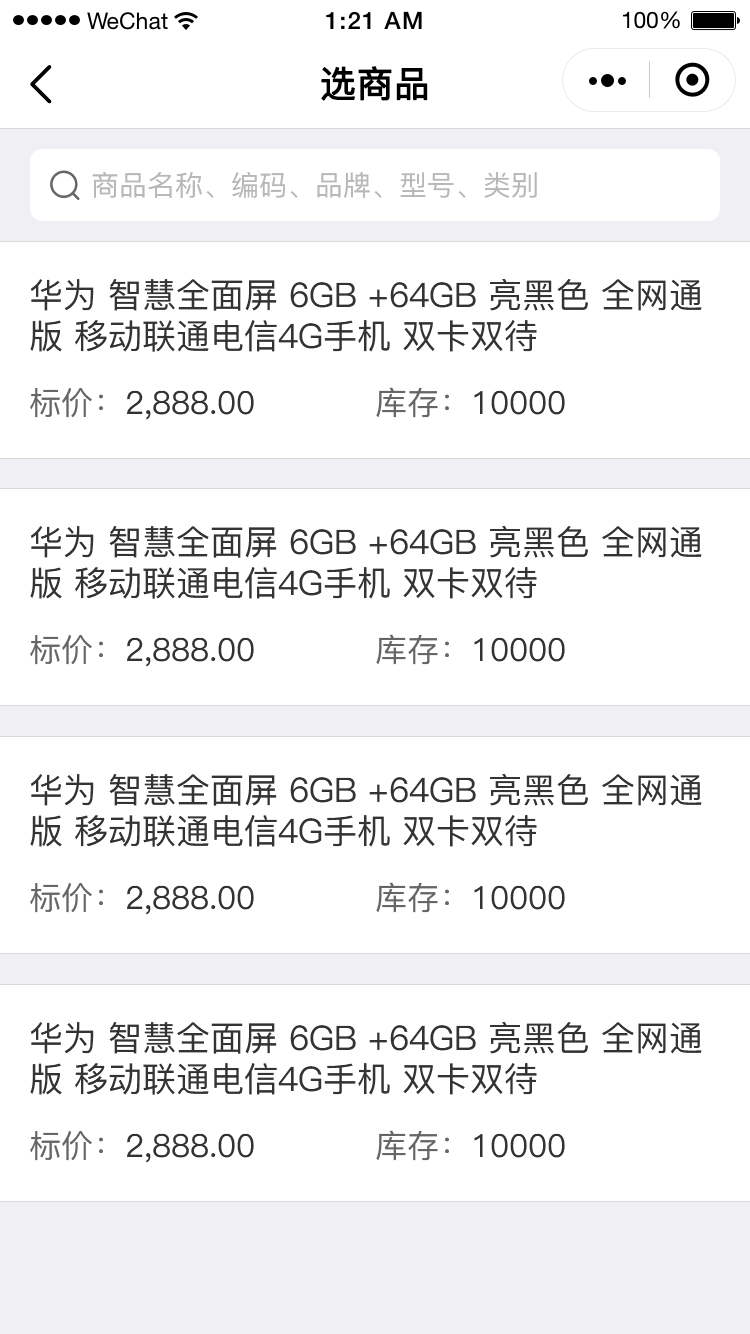
<style>
.page{position:relative;width:750px;height:1334px;background:#ffffff}
.page>*{position:absolute;margin:0}
.t1{font:36px "PingFang-SC-Medium";color:#000000;font-weight:bold}
.t2{font:28px "PingFang-SC-Medium";color:#b8b8b8}
.t3{font:34px "PingFang-SC-Medium";color:#333333}
.t4{font:32px "PingFang-SC-Medium";color:#333333}
.t5{font:32px "PingFang-SC-Medium";color:#666666}
</style>
<div class="page">
<p class="t1" style="left:321px;top:66px;width:107px;height:35px">选商品</p>
<p class="t2" style="left:92px;top:172px;width:445px;height:26px">商品名称、编码、品牌、型号、类别</p>
<p class="t3" style="left:30px;top:279px;width:672px;height:73px">华为 智慧全面屏 6GB +64GB 亮黑色 全网通版 移动联通电信4G手机 双卡双待</p>
<p class="t4" style="left:30px;top:388px;width:224px;height:32px"><span class="t5">标价：</span>2,888.00</p>
<p class="t4" style="left:376px;top:387px;width:189px;height:31px"><span class="t5">库存：</span>10000</p>
<p class="t3" style="left:30px;top:526px;width:672px;height:73px">华为 智慧全面屏 6GB +64GB 亮黑色 全网通版 移动联通电信4G手机 双卡双待</p>
<p class="t4" style="left:30px;top:635px;width:224px;height:32px"><span class="t5">标价：</span>2,888.00</p>
<p class="t4" style="left:376px;top:634px;width:189px;height:31px"><span class="t5">库存：</span>10000</p>
<p class="t3" style="left:30px;top:774px;width:672px;height:73px">华为 智慧全面屏 6GB +64GB 亮黑色 全网通版 移动联通电信4G手机 双卡双待</p>
<p class="t4" style="left:30px;top:883px;width:224px;height:32px"><span class="t5">标价：</span>2,888.00</p>
<p class="t4" style="left:376px;top:882px;width:189px;height:31px"><span class="t5">库存：</span>10000</p>
<p class="t3" style="left:30px;top:1022px;width:672px;height:73px">华为 智慧全面屏 6GB +64GB 亮黑色 全网通版 移动联通电信4G手机 双卡双待</p>
<p class="t4" style="left:30px;top:1131px;width:224px;height:32px"><span class="t5">标价：</span>2,888.00</p>
<p class="t4" style="left:376px;top:1130px;width:189px;height:31px"><span class="t5">库存：</span>10000</p>
</div>
